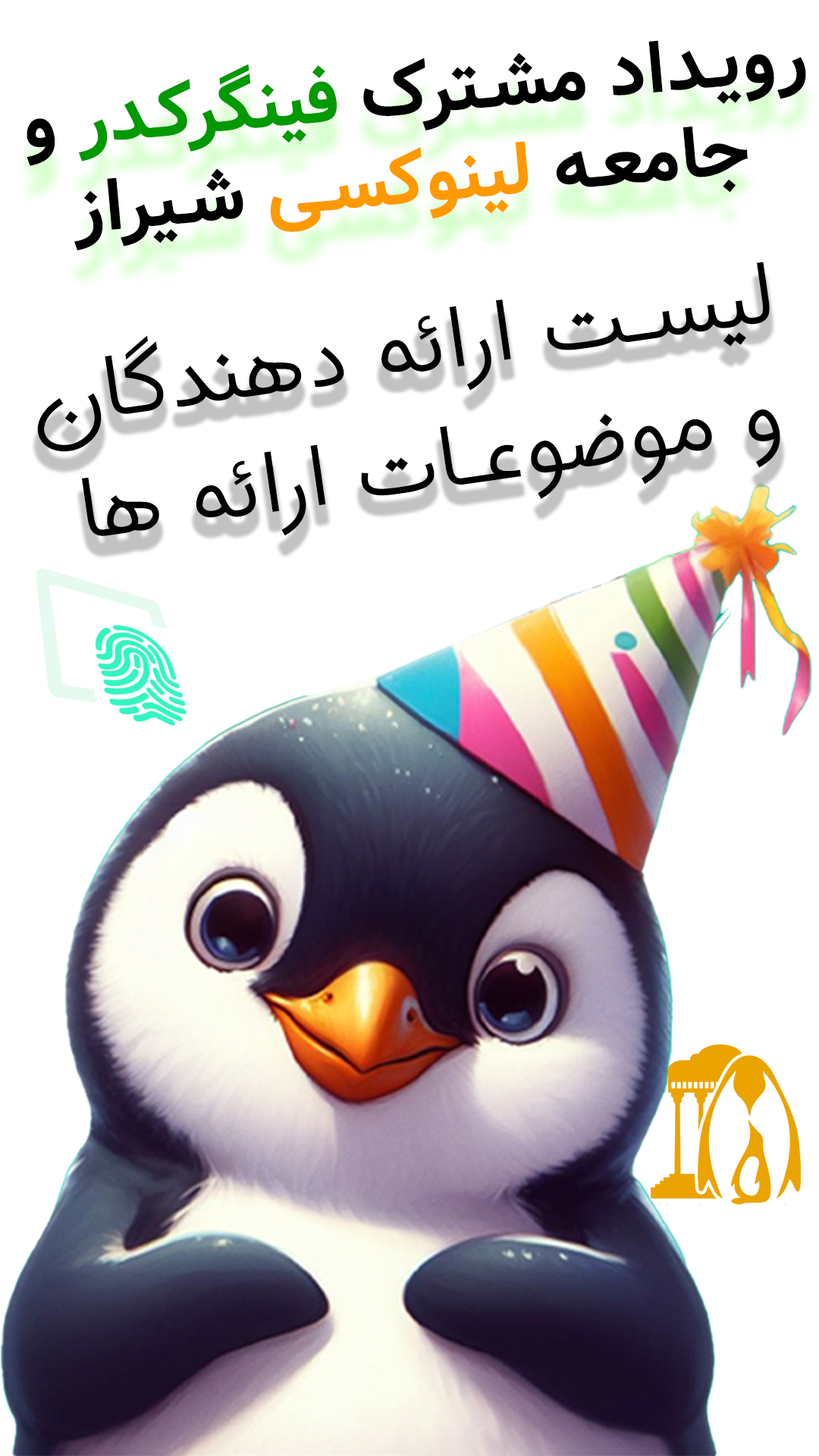
<style>
.page{position:relative;width:819px;height:1456px;background:#ffffff}
.page>*{position:absolute;margin:0}
.t1{font:72.7px/88.5px "Vazir-Bold";letter-spacing:0.035em;color:#000000;text-transform:uppercase}
.t2{font:72.7px/88.5px "Vazir-Bold";letter-spacing:0.035em;color:#009900;text-transform:uppercase}
.t3{font:72.7px/88.5px "Vazir-Bold";letter-spacing:0.035em;color:#ff9900;text-transform:uppercase}
.t4{font:100.8px/117.6px "Estedad-regular";letter-spacing:0.035em;color:#000000;text-transform:uppercase}
</style>
<div class="page">
<p class="t1" style="left:27px;top:40px;width:779px;height:210px;text-align:center;rotate:-5deg">رویداد مشترک <span class="t2">فینگرکدر</span> و<br>جامعه <span class="t3">لینوکسی </span>شیراز</p>
<p class="t4" style="left:37px;top:262px;width:743px;height:274px;text-align:center;rotate:-8deg">لیست ارائه دهندگان<br> و موضوعات ارائه ها</p>
</div>
